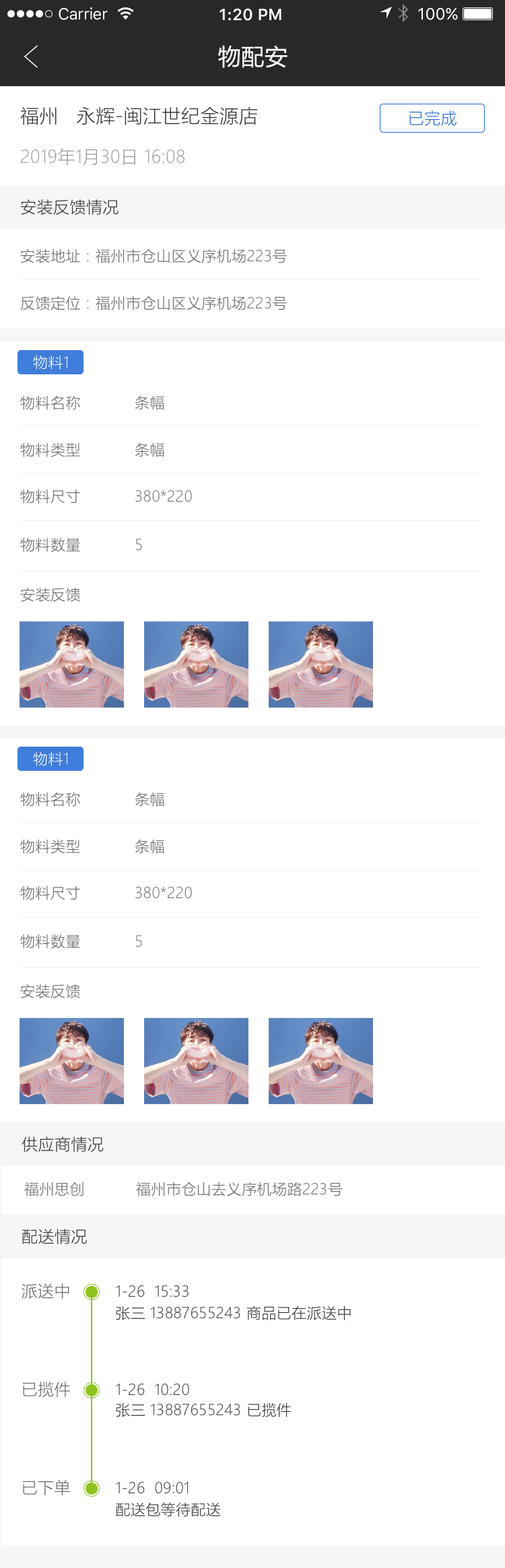
<style>
.page{position:relative;width:505px;height:1568px;background:#ffffff}
.page>*{position:absolute;margin:0}
.t1{font:16.2px "SFUIText-Regular";letter-spacing:-0.025em;color:#ffffff}
.t2{font:16.2px "SFUIText-Semibold";color:#ffffff}
.t3{font:16.2px "SFUIText-Regular";color:#ffffff}
.t4{font:22.9px "MicrosoftYaHei";letter-spacing:0.02em;color:#ffffff}
.t5{font:18.9px "MicrosoftYaHeiLight";letter-spacing:0.02em;color:#333333}
.t6{font:16.2px "MicrosoftYaHeiLight";letter-spacing:0.02em;color:#2269d4}
.t7{font:17.5px "MicrosoftYaHeiLight";letter-spacing:0.02em;color:#999999}
.t8{font:16.2px "MicrosoftYaHeiLight";letter-spacing:0.02em;color:#333333}
.t9{font:14.8px "MicrosoftYaHeiLight";letter-spacing:0.02em;color:#666666}
.t10{font:14.8px "MicrosoftYaHeiLight";letter-spacing:0.02em;color:#ffffff}
.t11{font:16.2px "MicrosoftYaHeiLight";letter-spacing:0.02em;color:#666666}
.t12{font:14.8px/21.5px "MicrosoftYaHeiLight";letter-spacing:0.02em;color:#333333}
.t13{font:14.8px/20.2px "MicrosoftYaHeiLight";letter-spacing:0.02em;color:#333333}
</style>
<div class="page">
<p class="t1" style="left:59px;top:7px;width:49px;height:13px">Carrier</p>
<p class="t2" style="left:219px;top:8px;width:62px;height:13px">1:20 PM</p>
<p class="t3" style="left:418px;top:7px;width:40px;height:13px">100%</p>
<p class="t4" style="left:218px;top:45px;width:69px;height:23px">物配安</p>
<p class="t5" style="left:20px;top:106px;width:238px;height:19px">福州   永辉-闽江世纪金源店</p>
<p class="t6" style="left:409px;top:110px;width:47px;height:16px">已完成</p>
<p class="t7" style="left:21px;top:148px;width:163px;height:18px">2019年1月30日 16:08</p>
<p class="t8" style="left:20px;top:199px;width:98px;height:16px">安装反馈情况</p>
<p class="t9" style="left:20px;top:248px;width:267px;height:15px">安装地址：福州市仓山区义序机场223号</p>
<p class="t9" style="left:20px;top:296px;width:267px;height:14px">反馈定位：福州市仓山区义序机场223号</p>
<p class="t10" style="left:33px;top:355px;width:35px;height:15px">物料1</p>
<p class="t9" style="left:20px;top:395px;width:60px;height:15px">物料名称</p>
<p class="t9" style="left:135px;top:396px;width:29px;height:14px">条幅</p>
<p class="t9" style="left:20px;top:442px;width:60px;height:15px">物料类型</p>
<p class="t9" style="left:135px;top:443px;width:29px;height:14px">条幅</p>
<p class="t9" style="left:20px;top:489px;width:60px;height:15px">物料尺寸</p>
<p class="t9" style="left:135px;top:490px;width:57px;height:12px">380*220</p>
<p class="t9" style="left:20px;top:537px;width:60px;height:15px">物料数量</p>
<p class="t9" style="left:135px;top:539px;width:7px;height:12px">5</p>
<p class="t9" style="left:20px;top:587px;width:60px;height:15px">安装反馈</p>
<p class="t10" style="left:33px;top:751px;width:35px;height:15px">物料1</p>
<p class="t9" style="left:20px;top:792px;width:60px;height:15px">物料名称</p>
<p class="t9" style="left:135px;top:792px;width:29px;height:15px">条幅</p>
<p class="t9" style="left:20px;top:839px;width:60px;height:15px">物料类型</p>
<p class="t9" style="left:135px;top:840px;width:29px;height:14px">条幅</p>
<p class="t9" style="left:20px;top:885px;width:60px;height:15px">物料尺寸</p>
<p class="t9" style="left:135px;top:887px;width:57px;height:12px">380*220</p>
<p class="t9" style="left:20px;top:934px;width:60px;height:15px">物料数量</p>
<p class="t9" style="left:135px;top:935px;width:7px;height:12px">5</p>
<p class="t9" style="left:20px;top:984px;width:60px;height:14px">安装反馈</p>
<p class="t8" style="left:22px;top:1136px;width:82px;height:16px">供应商情况</p>
<p class="t9" style="left:136px;top:1182px;width:207px;height:14px">福州市仓山去义序机场路223号</p>
<p class="t9" style="left:24px;top:1182px;width:59px;height:14px">福州思创</p>
<p class="t8" style="left:22px;top:1229px;width:65px;height:15px">配送情况</p>
<p class="t11" style="left:22px;top:1283px;width:47px;height:16px">派送中</p>
<p class="t12" style="left:116px;top:1285px;width:235px;height:35px">1-26  15:33<br>张三 13887655243 商品已在派送中</p>
<p class="t11" style="left:22px;top:1382px;width:48px;height:15px">已揽件</p>
<p class="t13" style="left:116px;top:1384px;width:175px;height:33px">1-26  10:20<br>张三 13887655243 已揽件</p>
<p class="t11" style="left:22px;top:1480px;width:48px;height:15px">已下单</p>
<p class="t12" style="left:116px;top:1482px;width:105px;height:35px">1-26  09:01<br>配送包等待配送</p>
</div>
